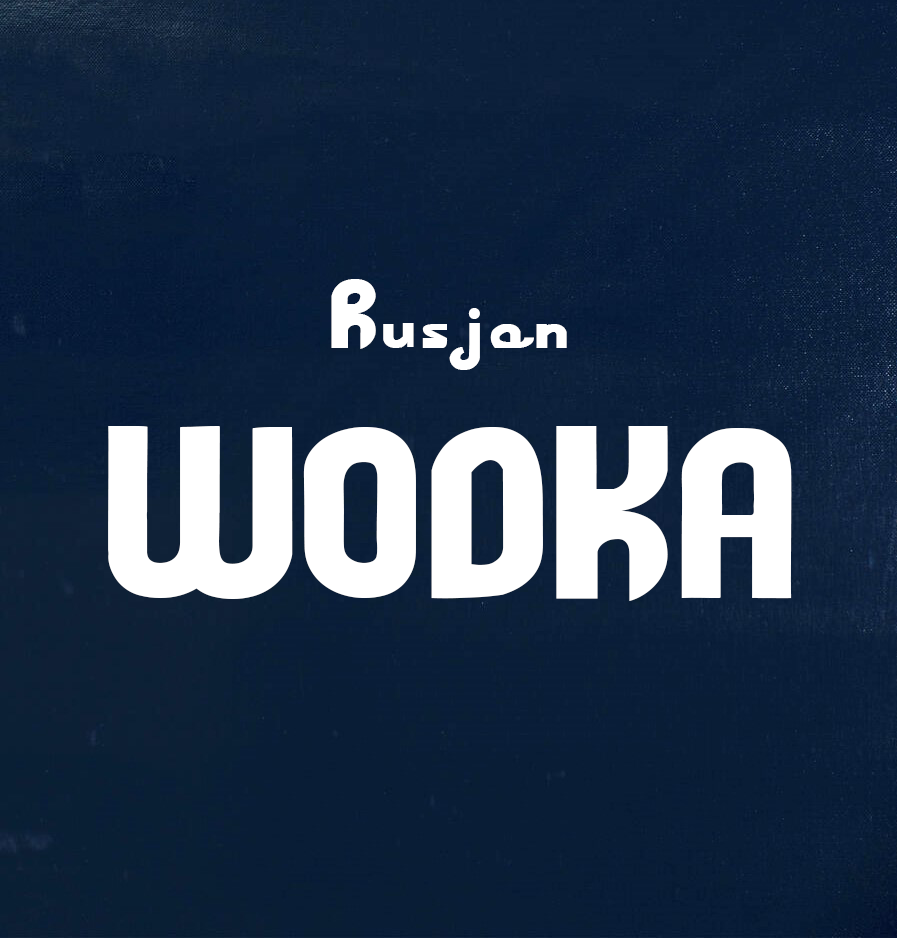
<style>
.page{position:relative;width:897px;height:938px}
.page>*{position:absolute;margin:0}
.t1{font:83.3px "FatVodka";color:#ffffff}
.t2{font:208.3px "FatVodka";color:#ffffff}
</style>
<div class="page">
<p class="t1" style="left:108px;top:279px;width:684px;height:322px;text-align:center">Rusjan<br><span class="t2">WODKA</span></p>
</div>
